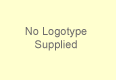
<style>
.page{position:relative;width:116px;height:80px;background:#ffffcf}
.page>*{position:absolute;margin:0}
.t1{font:11px "ArialMT";color:#706e6e}
</style>
<div class="page">
<p class="t1" style="left:25px;top:27px;width:62px;height:24px;text-align:center">No Logotype<br>Supplied</p>
</div>
